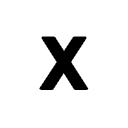
<style>
.page{position:relative;width:128px;height:128px;background:#ffffff}
.page>*{position:absolute;margin:0}
.t1{font:72px "Arial-BoldMT";letter-spacing:0.02em;color:#000000}
</style>
<div class="page">
<p class="t1" style="left:40px;top:37px;width:48px;height:52px">X</p>
</div>
